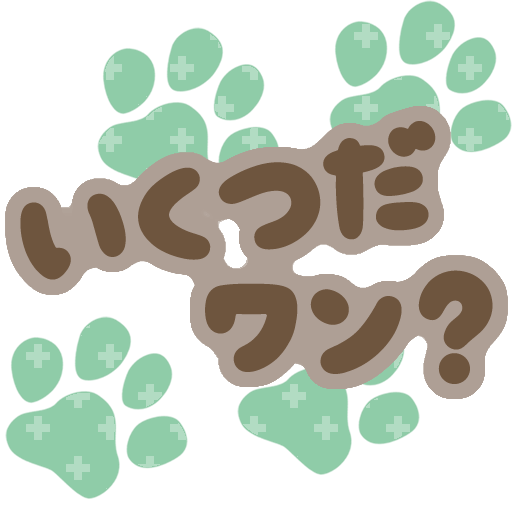
<style>
.page{position:relative;width:512px;height:512px;background:#ffffff}
.page>*{position:absolute;margin:0}
.t1{font:124px "funwariround";color:#6e553e}
</style>
<div class="page">
<p class="t1" style="left:20px;top:121px;width:416px;height:159px;rotate:-9deg">いくつだ</p>
<p class="t1" style="left:205px;top:270px;width:288px;height:114px">ワン？</p>
</div>
